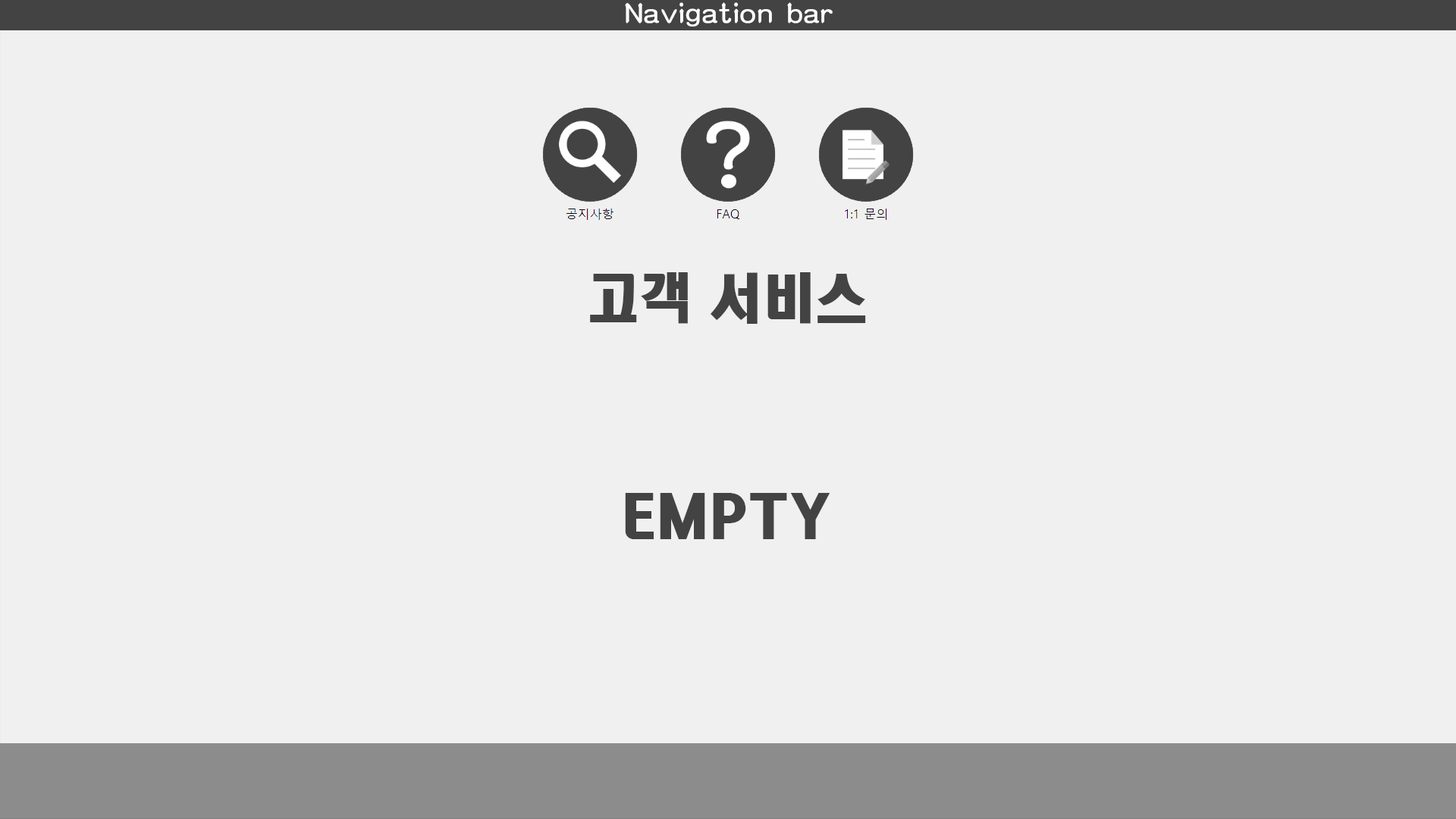
<style>
.page{position:relative;width:1456px;height:819px;background:#f0f0f0}
.page>*{position:absolute;margin:0}
.t1{font:26.5px "MDArt";color:#ffffff}
.t2{font:53.1px "HeadlineR-HM";color:#434343}
.t3{font:53.1px "HeadlineR-HM";letter-spacing:0.3em;color:#434343}
</style>
<div class="page">
<p class="t1" style="left:625px;top:2px;width:208px;height:25px">Navigation bar</p>
<p class="t2" style="left:590px;top:272px;width:276px;height:52px">고<span class="t3">객</span>서비스</p>
<p class="t2" style="left:625px;top:493px;width:205px;height:46px">EMPTY</p>
</div>
